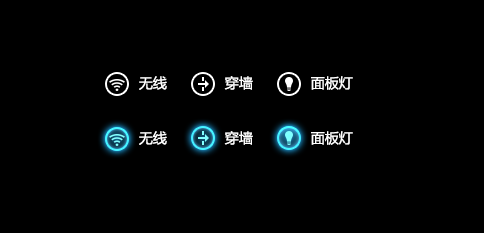
<style>
.page{position:relative;width:484px;height:233px;background:#000000}
.page>*{position:absolute;margin:0}
.t1{font:14px "MicrosoftYaHei";color:#ffffff}
</style>
<div class="page">
<p class="t1" style="left:139px;top:76px;width:28px;height:14px">无线</p>
<p class="t1" style="left:224px;top:76px;width:29px;height:14px">穿墙</p>
<p class="t1" style="left:311px;top:76px;width:42px;height:14px">面板灯</p>
<p class="t1" style="left:139px;top:131px;width:28px;height:14px">无线</p>
<p class="t1" style="left:224px;top:131px;width:29px;height:14px">穿墙</p>
<p class="t1" style="left:311px;top:131px;width:42px;height:14px">面板灯</p>
</div>
